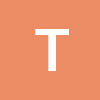
<style>
.page{position:relative;width:100px;height:100px;background:#ec8d66}
.page>*{position:absolute;margin:0}
.t1{font:60px "Avenir-Heavy";color:#ffffff}
</style>
<div class="page">
<p class="t1" style="left:35px;top:29px;width:34px;height:42px">T</p>
</div>
